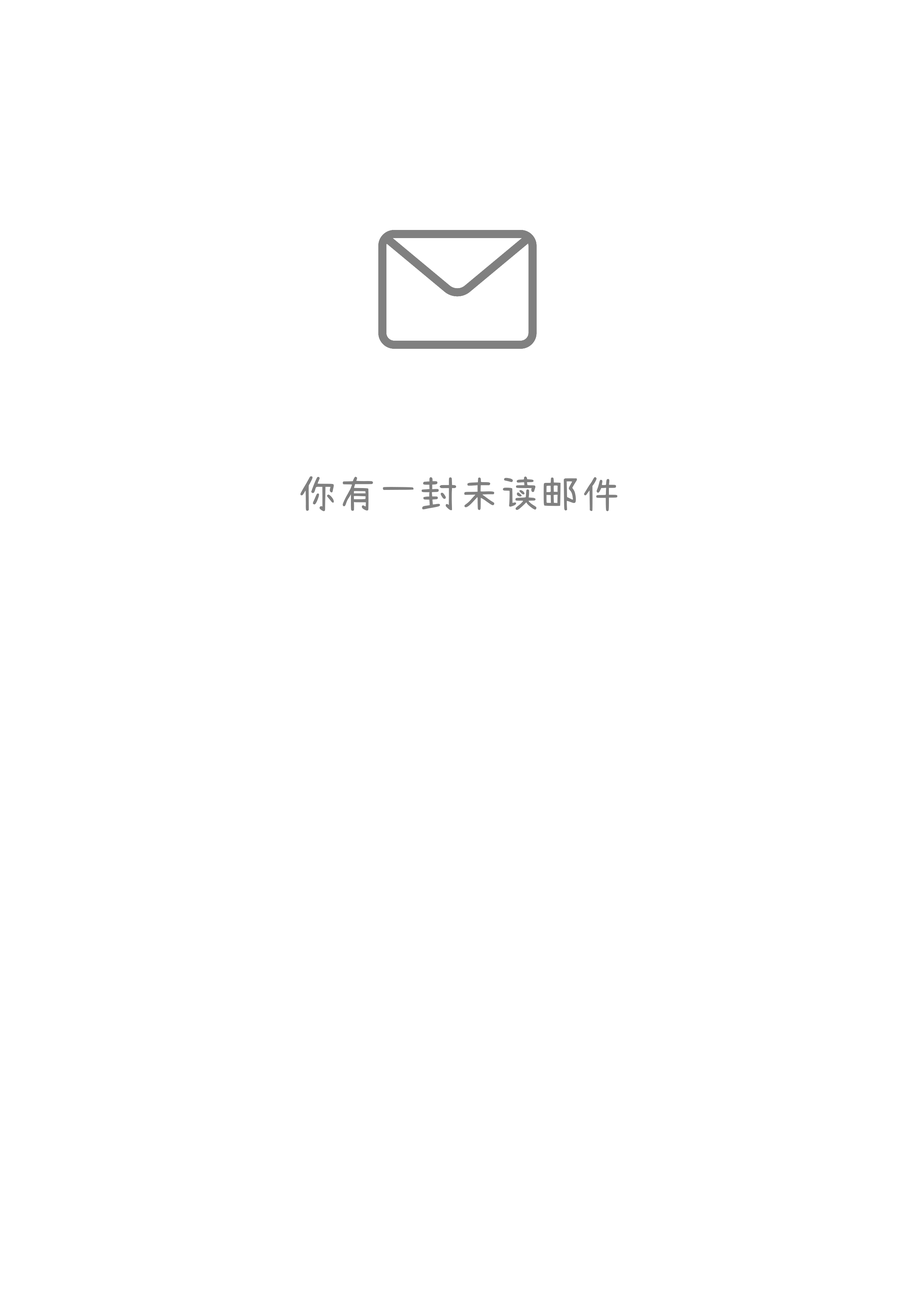
<style>
.page{position:relative;width:918px;height:1299px;background:#ffffff}
.page>*{position:absolute;margin:0}
.t1{font:40.5px "cjkFonts-Regular";color:#808080}
</style>
<div class="page">
<p class="t1" style="left:300px;top:476px;width:318px;height:35px">你有一封未读邮件</p>
</div>
